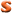
<style>
.page{position:relative;width:16px;height:16px;background:#ffffff}
.page>*{position:absolute;margin:0}
.t1{font:23px "CooperBlackStd"}
</style>
<div class="page">
<p class="t1" style="left:0px;top:0px;width:12px;height:13px">s</p>
</div>
